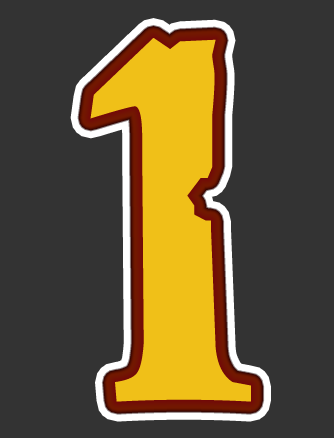
<style>
.page{position:relative;width:334px;height:438px;background:#333333}
.page>*{position:absolute;margin:0}
.t1{font:550px "PiecesofEight";letter-spacing:0.18em;color:#f0c018}
</style>
<div class="page">
<p class="t1" style="left:90px;top:38px;width:161px;height:364px">1</p>
</div>
